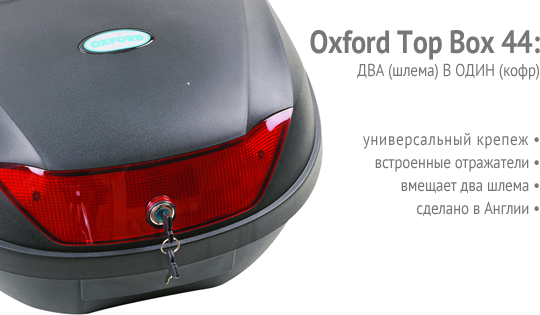
<style>
.page{position:relative;width:540px;height:315px;background:#ffffff}
.page>*{position:absolute;margin:0}
.t1{font:17.2px/23px "PTSans-Regular";letter-spacing:-0.01em;color:#777777;scale:0.87 1}
.t2{font:32.2px/21px "PTSans-Bold";letter-spacing:-0.01em;color:#777777;scale:0.87 1}
.t3{font:17.2px/23px "PTSans-Regular";letter-spacing:0.04em;color:#777777;scale:0.87 1}
</style>
<div class="page">
<p class="t1" style="left:310px;top:30px;width:230px;height:187px;text-align:right"><span class="t2">Oxford Top Box 44:<br></span>ДВА (шлема) В ОДИН (кофр)<br><br><br><span class="t3">универсальный крепеж •<br></span>встроенные отражатели •<br>вмещает два шлема •<br>сделано в Англии •</p>
</div>
